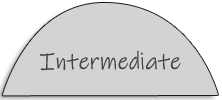
<style>
.page{position:relative;width:222px;height:100px;background:#d3d3d3}
.page>*{position:absolute;margin:0}
.t1{font:24px "InkFree";color:#424242}
</style>
<div class="page">
<p class="t1" style="left:40px;top:50px;width:141px;height:21px">Intermediate</p>
</div>
